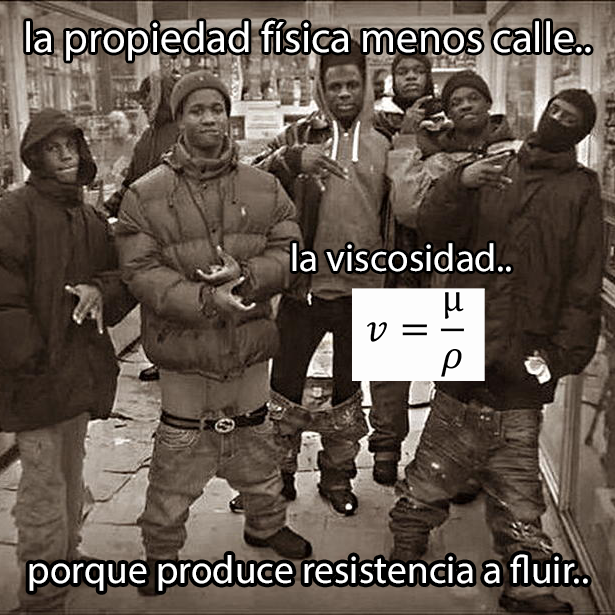
<style>
.page{position:relative;width:615px;height:615px}
.page>*{position:absolute;margin:0}
.t1{font:43.3px "MyriadPro-Regular";color:#ffffff}
.t2{font:39.2px "MyriadPro-Regular";color:#ffffff}
.t3{font:39.4px "MyriadPro-Regular";color:#ffffff}
</style>
<div class="page">
<p class="t1" style="left:26px;top:20px;width:565px;height:41px">la propiedad física menos calle..</p>
<p class="t2" style="left:292px;top:243px;width:219px;height:29px">la viscosidad..</p>
<p class="t3" style="left:29px;top:554px;width:559px;height:37px">porque produce resistencia a fluir..</p>
</div>
